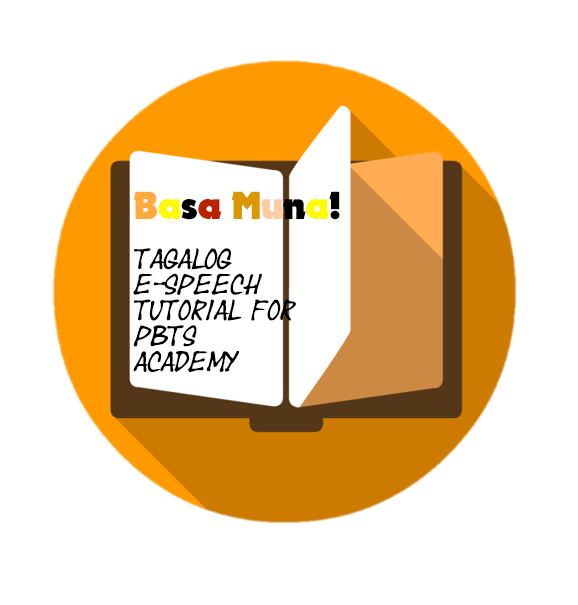
<style>
.page{position:relative;width:578px;height:605px;background:#ffffff}
.page>*{position:absolute;margin:0}
.t1{font:37.5px "November";color:#ffa93f}
.t2{font:37.5px "November";color:#fffb06}
.t3{font:37.5px "November";color:#000000}
.t4{font:37.5px "November";color:#ba2300}
.t5{font:37.5px "November";color:#da9700}
.t6{font:37.5px "November";color:#ffcba3}
.t7{font:37.5px "November";color:#fffb05}
.t8{font:21.4px "Yearsupplyoffairycakes";color:#000000}
</style>
<div class="page">
<p class="t1" style="left:133px;top:191px;width:207px;height:29px">B<span class="t2">a</span><span class="t3">s</span><span class="t4">a </span><span class="t5">M</span><span class="t6">u</span><span class="t3">n</span><span class="t7">a</span><span class="t3">!</span></p>
<p class="t8" style="left:133px;top:248px;width:163px;height:124px">Tagalog<br>E-Speech<br>Tutorial For<br>PBTS<br>ACADEMY</p>
</div>
